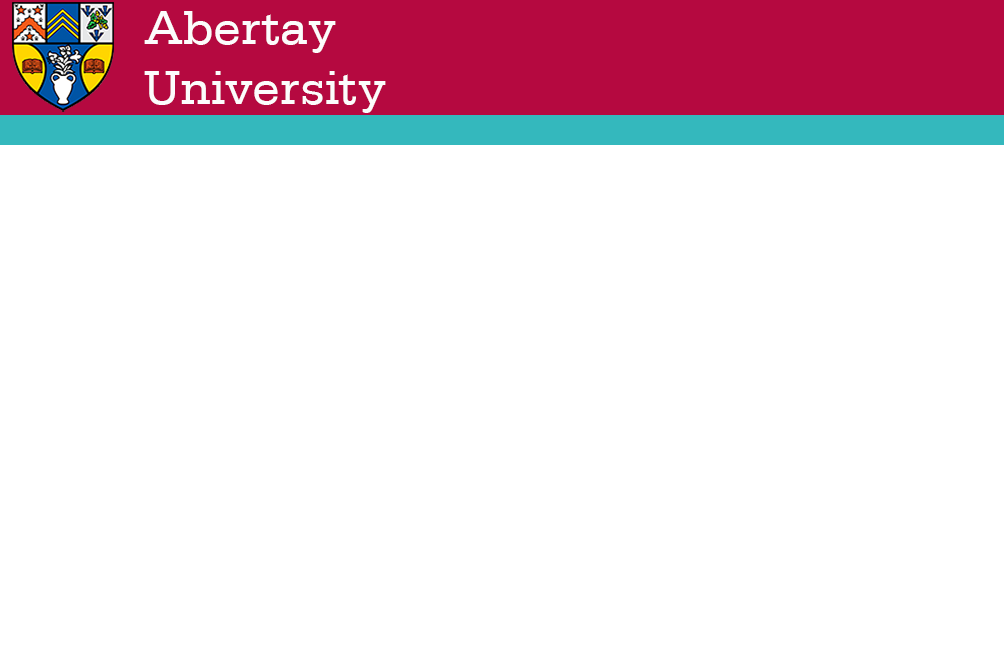
<style>
.page{position:relative;width:1004px;height:650px;background:#ffffff}
.page>*{position:absolute;margin:0}
.t1{font:50px "Serifa-Roman";color:#fcfcfc}
</style>
<div class="page">
<p class="t1" style="left:144px;top:11px;width:242px;height:102px">Abertay <br>University</p>
</div>
